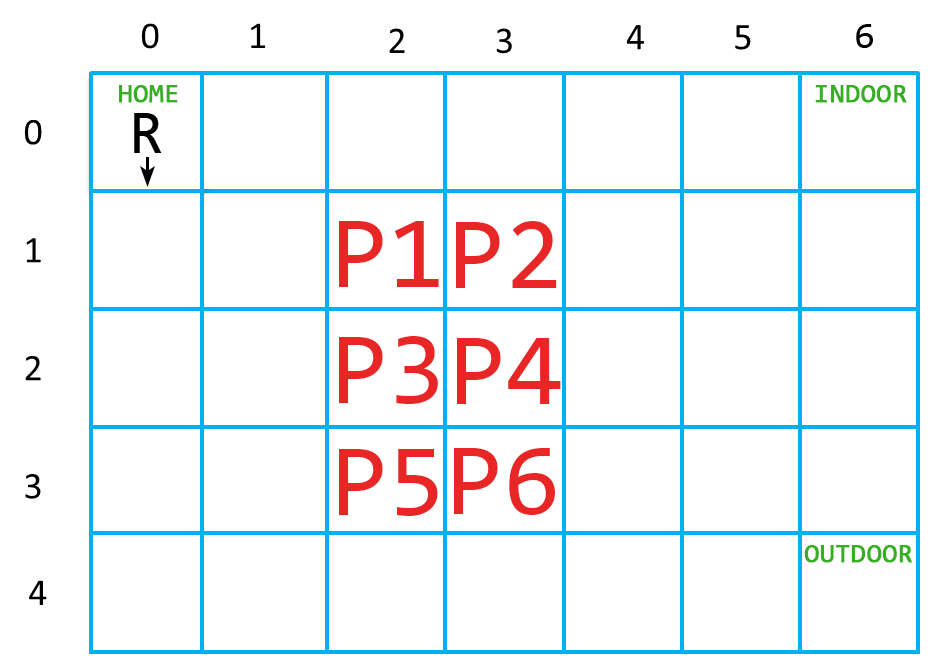
<style>
.page{position:relative;width:943px;height:671px;background:#ffffff}
.page>*{position:absolute;margin:0}
.t1{font:27.1px "Consolas";color:#36af22;font-weight:bold}
.t2{font:104.2px "Consolas";color:#e82626}
</style>
<div class="page">
<p class="t1" style="left:119px;top:85px;width:59px;height:18px">HOME</p>
<p class="t1" style="left:815px;top:85px;width:92px;height:18px">INDOOR</p>
<p class="t2" style="left:339px;top:221px;width:100px;height:66px">P1</p>
<p class="t2" style="left:456px;top:221px;width:101px;height:67px">P2</p>
<p class="t2" style="left:339px;top:336px;width:99px;height:68px">P3</p>
<p class="t2" style="left:457px;top:338px;width:104px;height:66px">P4</p>
<p class="t2" style="left:339px;top:449px;width:99px;height:67px">P5</p>
<p class="t2" style="left:454px;top:448px;width:101px;height:67px">P6</p>
<p class="t1" style="left:804px;top:545px;width:108px;height:18px">OUTDOOR</p>
</div>
